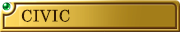
<style>
.page{position:relative;width:180px;height:32px}
.page>*{position:absolute;margin:0}
.t1{font:16px "CenturySchoolbook";letter-spacing:0.025em;color:#321a02}
</style>
<div class="page">
<p class="t1" style="left:21px;top:9px;width:49px;height:13px">CIVIC</p>
</div>
